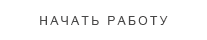
<style>
.page{position:relative;width:207px;height:40px;background:#ffffff}
.page>*{position:absolute;margin:0}
.t1{font:12px "ArialMT";letter-spacing:0.2em;color:#484747;text-transform:uppercase}
</style>
<div class="page">
<p class="t1" style="left:40px;top:16px;width:128px;height:9px">Начать работу</p>
</div>
